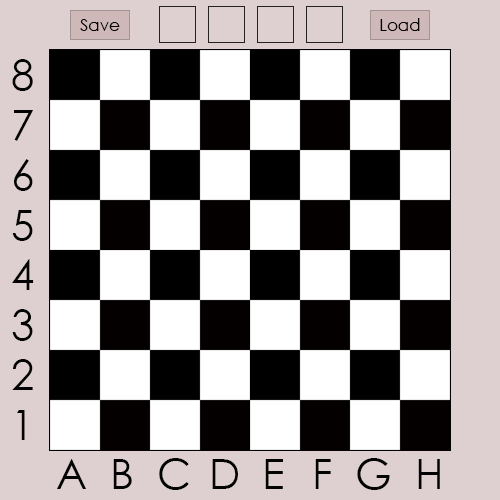
<style>
.page{position:relative;width:500px;height:500px;background:#ded0d0}
.page>*{position:absolute;margin:0}
.t1{font:16.7px "CenturyGothic";color:#000000}
.t2{font:41.7px "CenturyGothic";color:#030303}
</style>
<div class="page">
<p class="t1" style="left:80px;top:19px;width:40px;height:12px">Save</p>
<p class="t1" style="left:380px;top:18px;width:40px;height:13px">Load</p>
<p class="t2" style="left:12px;top:59px;width:22px;height:381px">8<br>7<br>6<br>5<br>4<br>3<br>2<br>1</p>
<p class="t2" style="left:57px;top:458px;width:383px;height:32px">A  B  C  D  E  F  G  H</p>
</div>
